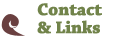
<style>
.page{position:relative;width:113px;height:40px;background:#ffffff}
.page>*{position:absolute;margin:0}
.t1{font:18px/18px "ChaparralPro-Bold";letter-spacing:-0.025em;color:#71834a;font-weight:bold}
</style>
<div class="page">
<p class="t1" style="left:37px;top:3px;width:65px;height:31px">Contact<br>&amp; Links</p>
</div>
